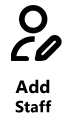
<style>
.page{position:relative;width:68px;height:131px;background:#ffffff}
.page>*{position:absolute;margin:0}
.t1{font:16px "MicrosoftTaiLe-Bold";color:#000000}
.t2{font:18px "MicrosoftTaiLe-Bold";color:#000000}
</style>
<div class="page">
<p class="t1" style="left:15px;top:79px;width:37px;height:34px;text-align:center"><span class="t2">Add<br></span>Staff</p>
</div>
